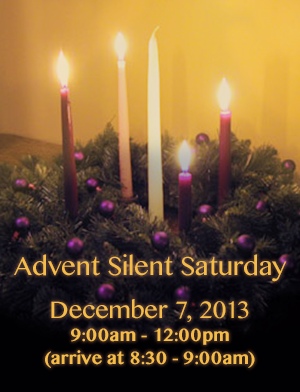
<style>
.page{position:relative;width:300px;height:392px}
.page>*{position:absolute;margin:0}
.t1{font:26px "OriyaMN";color:#f5bc48}
.t2{font:18px/8px "OriyaMN-Bold";letter-spacing:-0.01em;color:#f5bc48}
.t3{font:24px/10px "OriyaMN";letter-spacing:-0.01em;color:#f5bc48}
.t4{font:14px/8px "OriyaMN-Bold";letter-spacing:-0.01em;color:#f5bc48}
</style>
<div class="page">
<p class="t1" style="left:14px;top:254px;width:273px;height:28px">Advent Silent Saturday</p>
<p class="t2" style="left:45px;top:299px;width:210px;height:69px;text-align:center"><span class="t3">December 7, 2013<br></span>9:00am - 12:00pm<br>(arrive at 8:30 - 9:00am)<br><br><span class="t4">Click Here for more information</span></p>
</div>
